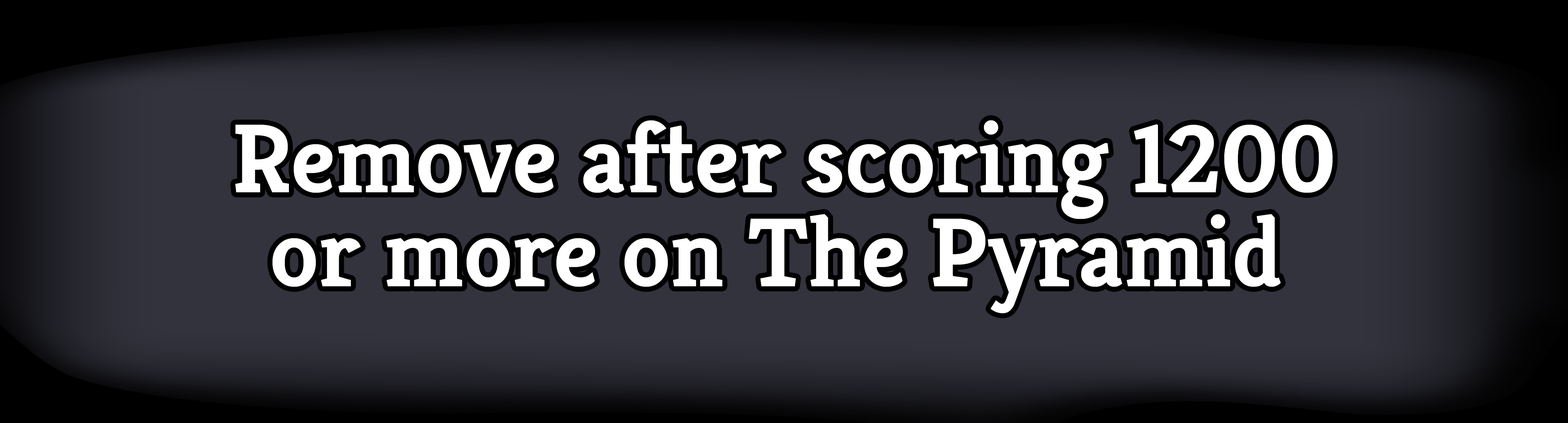
<style>
.page{position:relative;width:1568px;height:423px;background:#32333d}
.page>*{position:absolute;margin:0}
.t1{font:98px/23.5px "Kreon-Bold";color:#ffffff}
</style>
<div class="page">
<p class="t1" style="left:235px;top:120px;width:1098px;height:194px;text-align:center">Remove after scoring 1200<br> <br><br><br>or more on The Pyramid</p>
</div>
